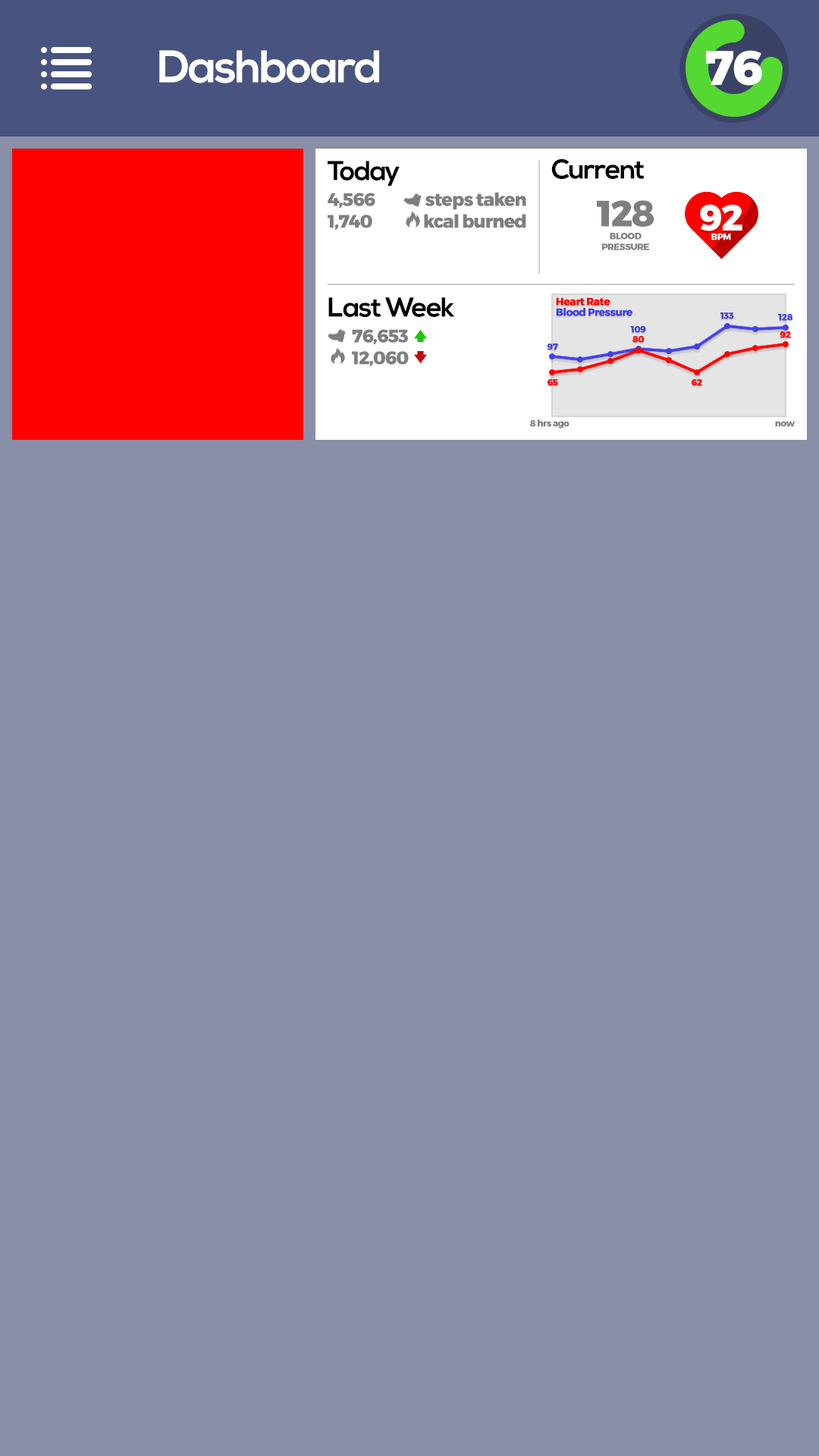
<style>
.page{position:relative;width:819px;height:1456px;background:#898fa6}
.page>*{position:absolute;margin:0}
.t1{font:45.5px "NexaBold";letter-spacing:-0.04em;color:#ffffff}
.t2{font:48.5px "Montserrat-ExtraBold";letter-spacing:-0.04em;color:#ffffff}
.t3{font:27.3px "NexaBold";letter-spacing:-0.04em;color:#000000}
.t4{font:18.2px "Montserrat-ExtraBold";letter-spacing:-0.04em;color:#7f7f7f}
.t5{font:36.4px "Montserrat-ExtraBold";letter-spacing:-0.04em;color:#7f7f7f}
.t6{font:36.4px "Montserrat-ExtraBold";letter-spacing:-0.04em;color:#ffffff}
.t7{font:9.1px "Montserrat-ExtraBold";letter-spacing:-0.04em;color:#7f7f7f}
.t8{font:9.1px "Montserrat-ExtraBold";letter-spacing:-0.04em;color:#ffffff}
.t9{font:10.6px "Montserrat-ExtraBold";letter-spacing:-0.04em;color:#ff0000}
.t10{font:10.6px "Montserrat-ExtraBold";letter-spacing:-0.04em;color:#4141e7}
.t11{font:9.1px "Montserrat-ExtraBold";letter-spacing:-0.04em;color:#4141e7}
.t12{font:9.1px "Montserrat-ExtraBold";letter-spacing:-0.04em;color:#ff0000}
</style>
<div class="page">
<p class="t1" style="left:159px;top:50px;width:220px;height:33px">Dashboard</p>
<p class="t2" style="left:706px;top:50px;width:56px;height:36px">76</p>
<p class="t3" style="left:328px;top:161px;width:72px;height:25px">Today</p>
<p class="t3" style="left:551px;top:158px;width:94px;height:21px">Current</p>
<p class="t4" style="left:328px;top:193px;width:47px;height:37px">4,566<br>1,740</p>
<p class="t4" style="left:424px;top:192px;width:102px;height:36px;text-align:right">steps taken<br>kcal burned</p>
<p class="t5" style="left:597px;top:200px;width:57px;height:27px">128</p>
<p class="t6" style="left:700px;top:204px;width:42px;height:27px">92</p>
<p class="t7" style="left:602px;top:233px;width:47px;height:17px;text-align:center">BLOOD<br>PRESSURE</p>
<p class="t8" style="left:711px;top:234px;width:20px;height:6px">BPM</p>
<p class="t3" style="left:328px;top:297px;width:127px;height:20px">Last Week</p>
<p class="t9" style="left:556px;top:297px;width:54px;height:9px">Heart Rate</p>
<p class="t10" style="left:556px;top:308px;width:76px;height:8px">Blood Pressure</p>
<p class="t11" style="left:720px;top:312px;width:14px;height:7px">133</p>
<p class="t11" style="left:778px;top:314px;width:15px;height:7px">128</p>
<p class="t4" style="left:352px;top:329px;width:57px;height:37px">76,653<br>12,060</p>
<p class="t11" style="left:630px;top:326px;width:16px;height:7px">109</p>
<p class="t12" style="left:632px;top:336px;width:13px;height:7px">80</p>
<p class="t12" style="left:780px;top:331px;width:11px;height:7px">92</p>
<p class="t11" style="left:547px;top:344px;width:11px;height:6px">97</p>
<p class="t12" style="left:548px;top:379px;width:10px;height:7px">65</p>
<p class="t12" style="left:692px;top:379px;width:10px;height:7px">62</p>
<p class="t7" style="left:530px;top:419px;width:40px;height:9px">8 hrs ago</p>
<p class="t7" style="left:775px;top:421px;width:20px;height:6px">now</p>
</div>
